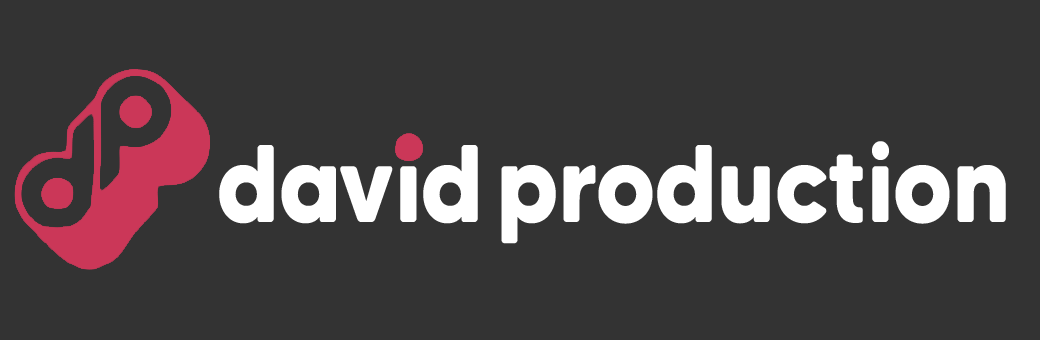
<style>
.page{position:relative;width:1040px;height:340px;background:#333333}
.page>*{position:absolute;margin:0}
.t1{font:110px "MADETommySoft-Bold";letter-spacing:-0.005em;color:#ffffff;scale:0.9 1}
</style>
<div class="page">
<p class="t1" style="left:219px;top:141px;width:787px;height:103px">david production</p>
</div>
